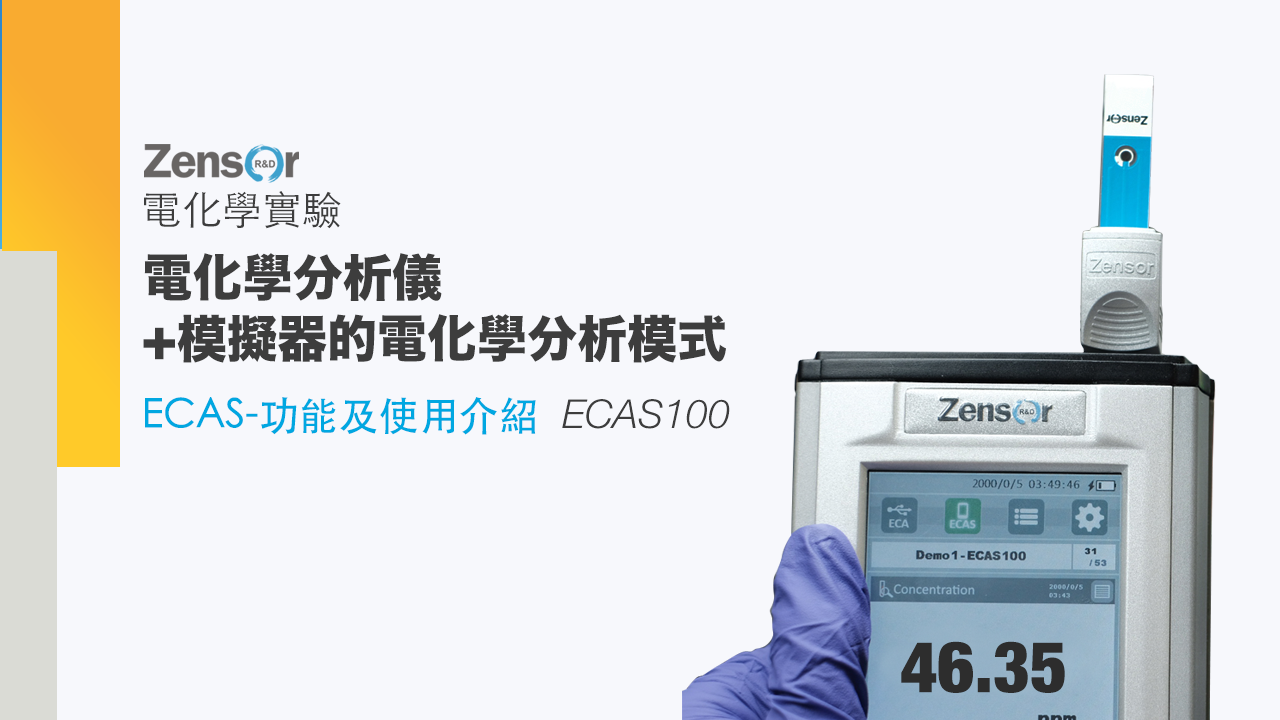
<style>
.page{position:relative;width:1280px;height:720px;background:#f7f8fc}
.page>*{position:absolute;margin:0}
.t1{font:40px "STHeitiTC-Light";color:#3d3d3d}
.t2{font:50px "HiraKakuStd-W8";color:#3d3d3d}
.t3{font:40px "STHeitiTC-Medium";color:#00a7e1}
.t4{font:40px "HelveticaNeueLTPro-LtIt";color:#3d3d3d}
.t5{font:71.6px "HelveticaNeue-CondensedBlack";color:#2d2d2d}
</style>
<div class="page">
<p class="t1" style="left:144px;top:191px;width:197px;height:38px">電化學實驗</p>
<p class="t2" style="left:144px;top:253px;width:298px;height:49px">電化學分析儀</p>
<p class="t2" style="left:143px;top:314px;width:583px;height:49px">+模擬器的電化學分析模式</p>
<p class="t3" style="left:145px;top:397px;width:391px;height:38px">ECAS-功能及使用介紹</p>
<p class="t4" style="left:562px;top:399px;width:168px;height:30px">ECAS100</p>
<p class="t5" style="left:901px;top:641px;width:164px;height:52px">46.35</p>
</div>
